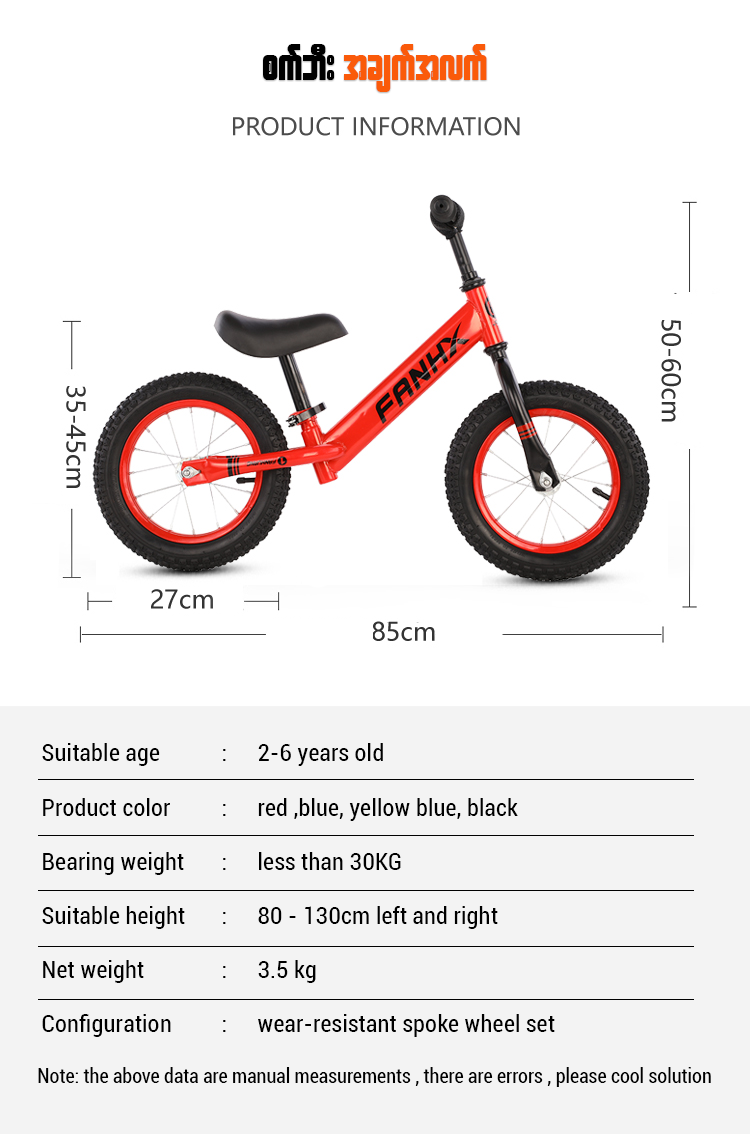
<style>
.page{position:relative;width:750px;height:1134px;background:#ffffff}
.page>*{position:absolute;margin:0}
.t1{font:48px "W30ArtHouse";color:#fa5a0a}
.t2{font:48px "W30ArtHouse";color:#000000}
.t3{font:24.5px/54.2px "Roboto-Condensed";color:#000000}
.t4{font:20px "Roboto-Condensed";color:#000000}
</style>
<div class="page">
<p class="t1" style="left:263px;top:44px;width:224px;height:48px"><span class="t2">pufbD; </span>tcsuftvuf</p>
<p class="t3" style="left:42px;top:743px;width:513px;height:294px">Suitable age   :  2-6 years old<br>Product color  :  red ,blue, yellow blue, black<br>Bearing weight  :  less than 30KG<br>Suitable height  :  80 - 130cm left and right<br>Net weight   :  3.5 kg<br>Configuration   :  wear-resistant spoke wheel set</p>
<p class="t4" style="left:38px;top:1067px;width:673px;height:20px">Note: the above data are manual measurements , there are errors , please cool solution</p>
</div>
